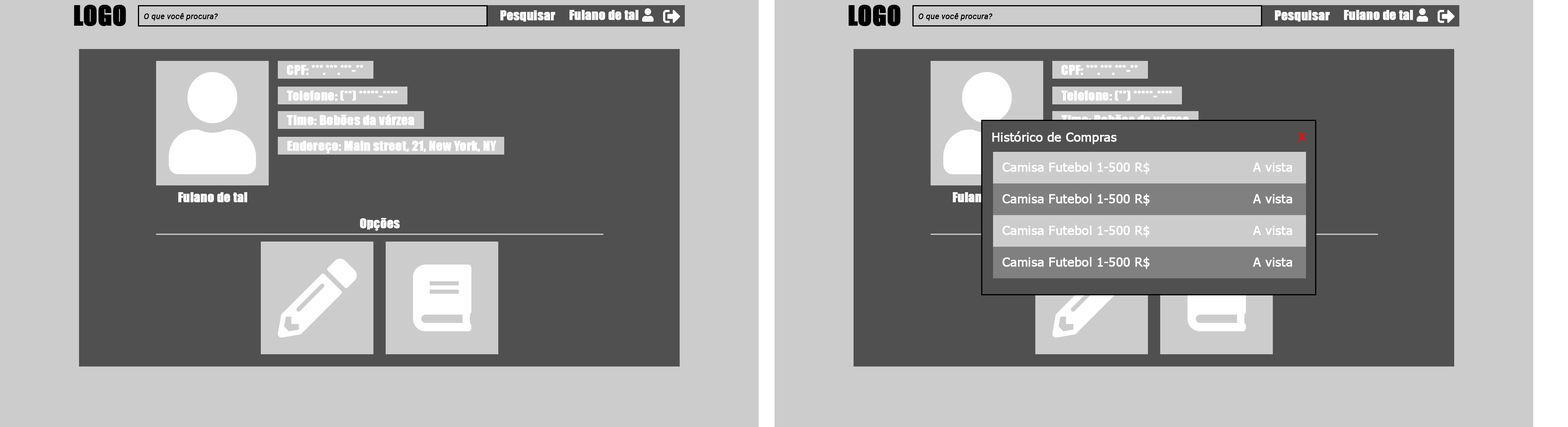
<style>
.page{position:relative;width:1568px;height:427px;background:#cccccc}
.page>*{position:absolute;margin:0}
.t1{font:7.9px "Roboto-Italic";color:#000000;font-weight:bold}
.t2{font:12.6px "Impact";color:#ffffff;font-weight:bold}
.t3{font:12.6px "Tahoma";color:#fefefe;font-weight:bold}
.t4{font:12.6px "Tahoma";color:#ff0000;font-weight:bold}
.t5{font:12.6px "Impact";color:#505050;font-weight:bold}
.t6{font:12.6px "Tahoma";color:#ffffff;font-weight:bold}
.t7{font:12.6px "Impact";font-weight:bold}
</style>
<div class="page">
<p class="t1" style="left:144px;top:13px;width:74px;height:8px">O que você procura?</p>
<p class="t2" style="left:500px;top:10px;width:55px;height:12px">Pesquisar</p>
<p class="t2" style="left:569px;top:10px;width:70px;height:10px">Fulano de tal</p>
<p class="t1" style="left:918px;top:13px;width:75px;height:8px">O que você procura?</p>
<p class="t2" style="left:1275px;top:10px;width:55px;height:12px">Pesquisar</p>
<p class="t2" style="left:1344px;top:10px;width:69px;height:10px">Fulano de tal</p>
<p class="t2" style="left:287px;top:65px;width:77px;height:10px">CPF: ***.***.***-**</p>
<p class="t2" style="left:1061px;top:65px;width:77px;height:10px">CPF: ***.***.***-**</p>
<p class="t2" style="left:287px;top:90px;width:111px;height:11px">Telefone: (**) *****-****</p>
<p class="t2" style="left:1061px;top:90px;width:111px;height:11px">Telefone: (**) *****-****</p>
<p class="t2" style="left:287px;top:115px;width:127px;height:10px">Time: Bobões da várzea</p>
<p class="t3" style="left:992px;top:131px;width:125px;height:13px">Histórico de Compras</p>
<p class="t4" style="left:1298px;top:132px;width:8px;height:9px">X</p>
<p class="t2" style="left:287px;top:141px;width:209px;height:12px">Endereço: Main street, 21, New York, NY</p>
<p class="t5" style="left:1062px;top:141px;width:209px;height:12px">Endereço: Main street, 21, New York, NY</p>
<p class="t6" style="left:1003px;top:162px;width:289px;height:12px">Camisa Futebol 1-500 R$                        A vista</p>
<p class="t2" style="left:178px;top:192px;width:69px;height:10px">Fulano de tal</p>
<p class="t7" style="left:953px;top:192px;width:69px;height:10px">Fulano de tal</p>
<p class="t6" style="left:1003px;top:194px;width:289px;height:12px">Camisa Futebol 1-500 R$                        A vista</p>
<p class="t2" style="left:360px;top:218px;width:40px;height:13px">Opções</p>
<p class="t6" style="left:1003px;top:225px;width:289px;height:12px">Camisa Futebol 1-500 R$                        A vista</p>
<p class="t6" style="left:1003px;top:257px;width:289px;height:12px">Camisa Futebol 1-500 R$                        A vista</p>
</div>
